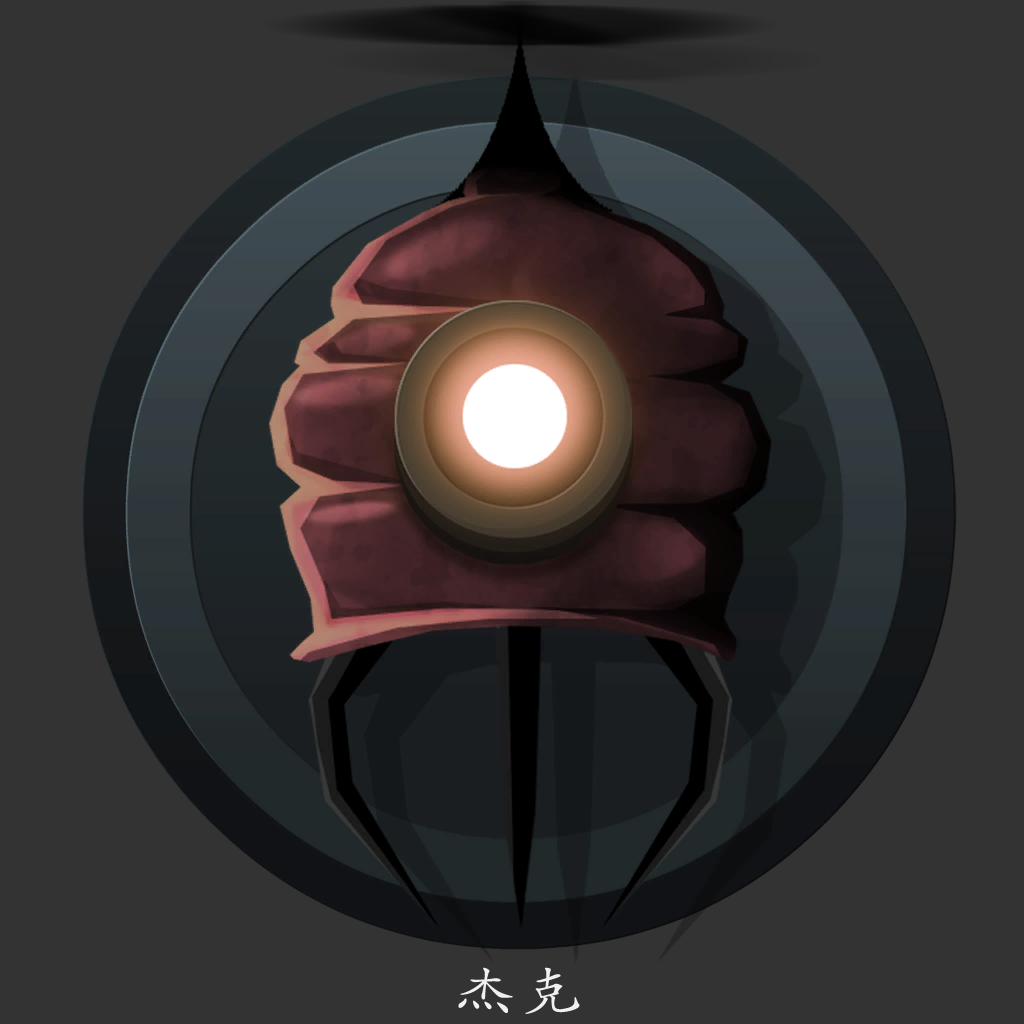
<style>
.page{position:relative;width:1024px;height:1024px;background:#333333}
.page>*{position:absolute;margin:0}
.t1{font:53.3px "STKaiti";letter-spacing:0.05em;color:#eff0ef}
</style>
<div class="page">
<p class="t1" style="left:458px;top:967px;width:122px;height:47px">杰克</p>
</div>
